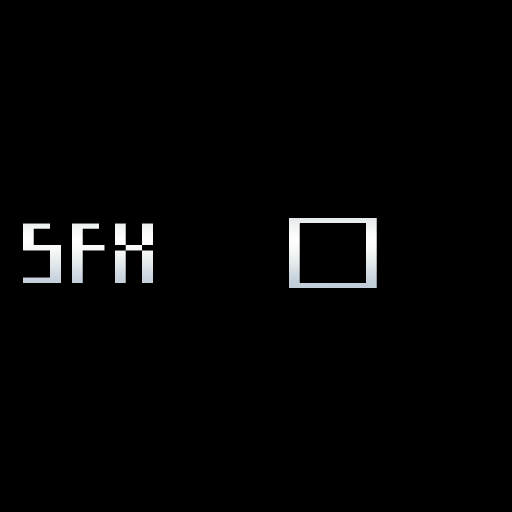
<style>
.page{position:relative;width:512px;height:512px;background:#000000}
.page>*{position:absolute;margin:0}
.t1{font:79.2px "Starcadia";color:#fffefe}
</style>
<div class="page">
<p class="t1" style="left:23px;top:223px;width:130px;height:60px">SFX</p>
</div>
